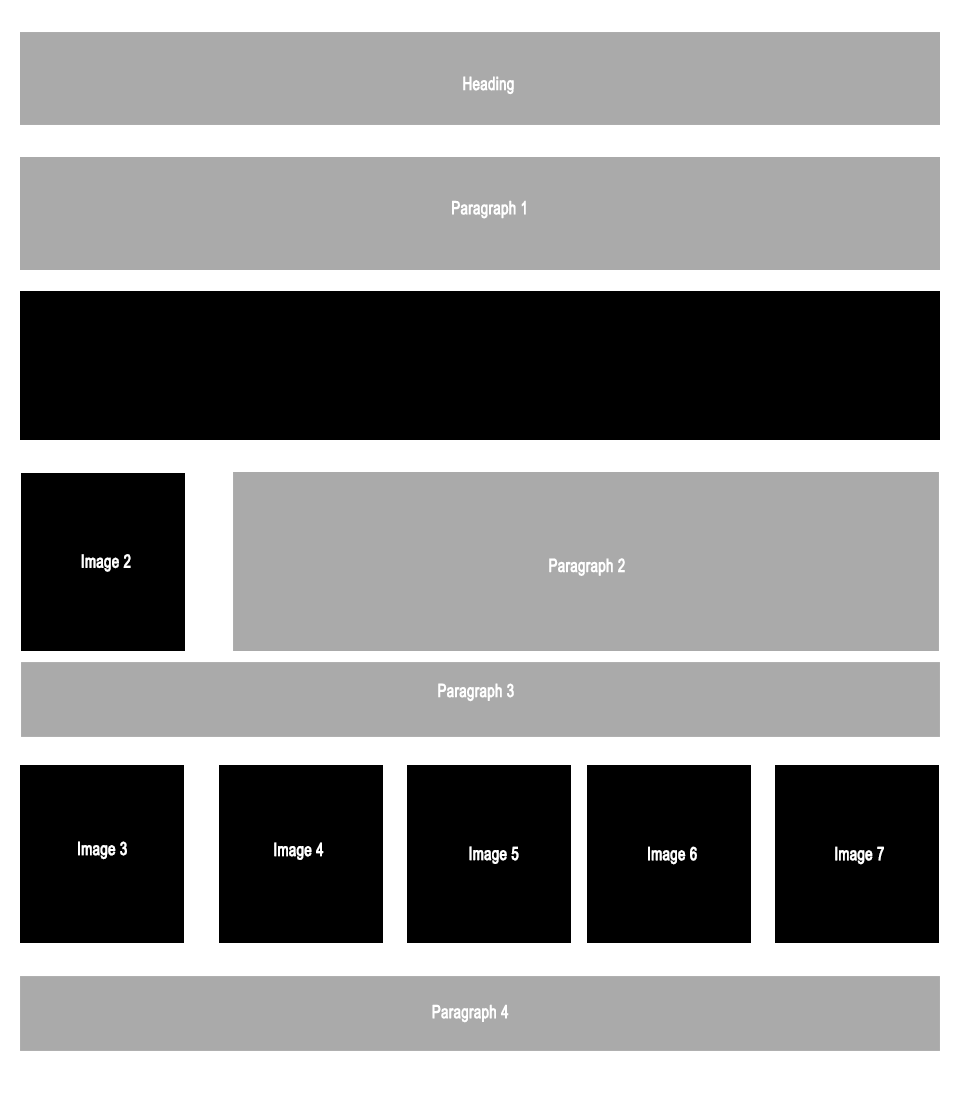
<style>
.page{position:relative;width:960px;height:1093px;background:#aaaaaa}
.page>*{position:absolute;margin:0}
.t1{font:18.2px "ArialNarrow";color:#ffffff;font-weight:bold;scale:0.88 1}
</style>
<div class="page">
<p class="t1" style="left:463px;top:76px;width:51px;height:19px">Heading</p>
<p class="t1" style="left:452px;top:200px;width:74px;height:19px">Paragraph 1</p>
<p class="t1" style="left:81px;top:554px;width:50px;height:18px">Image 2</p>
<p class="t1" style="left:549px;top:558px;width:76px;height:18px">Paragraph 2</p>
<p class="t1" style="left:438px;top:683px;width:76px;height:19px">Paragraph 3</p>
<p class="t1" style="left:78px;top:841px;width:49px;height:19px">Image 3</p>
<p class="t1" style="left:274px;top:842px;width:50px;height:18px">Image 4</p>
<p class="t1" style="left:469px;top:846px;width:50px;height:18px">Image 5</p>
<p class="t1" style="left:648px;top:846px;width:49px;height:19px">Image 6</p>
<p class="t1" style="left:835px;top:846px;width:49px;height:19px">Image 7</p>
<p class="t1" style="left:432px;top:1004px;width:77px;height:19px">Paragraph 4</p>
</div>
